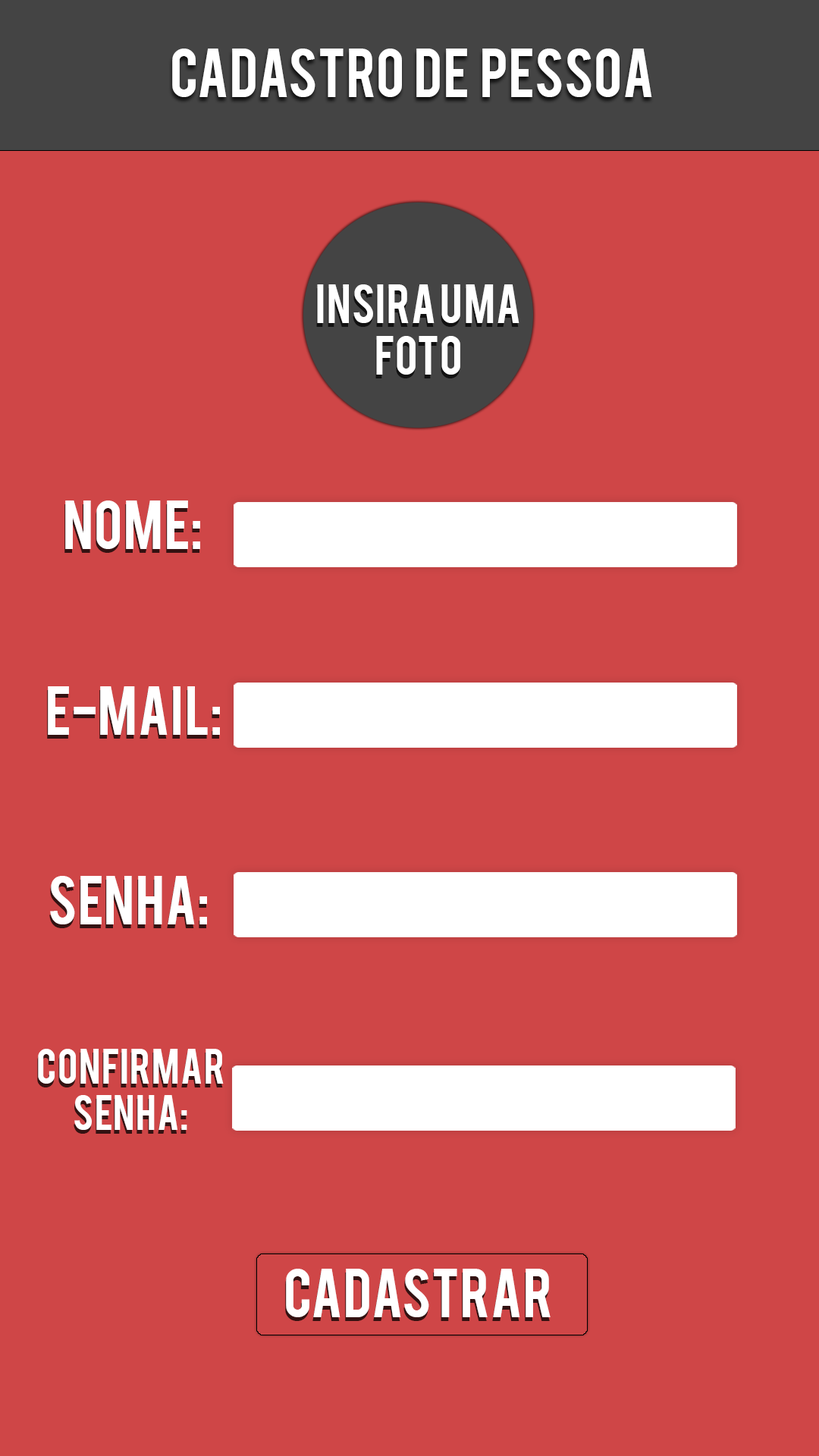
<style>
.page{position:relative;width:819px;height:1456px;background:#cf4647}
.page>*{position:absolute;margin:0}
.t1{font:54.6px "Bebas";color:#ffffff}
.t2{font:43.3px "Bebas";color:#ffffff}
.t3{font:38.7px "Bebas";color:#ffffff}
</style>
<div class="page">
<p class="t1" style="left:172px;top:49px;width:480px;height:48px">cadastro  de  pessoa</p>
<p class="t2" style="left:317px;top:284px;width:202px;height:91px;text-align:center">INSIRA UMA<br>FOTO</p>
<p class="t1" style="left:65px;top:500px;width:135px;height:49px">Nome:</p>
<p class="t1" style="left:48px;top:686px;width:172px;height:49px">E-mail:</p>
<p class="t1" style="left:50px;top:876px;width:157px;height:48px">Senha:</p>
<p class="t3" style="left:38px;top:1049px;width:186px;height:81px;text-align:center">Confirmar<br>Senha:</p>
<p class="t1" style="left:286px;top:1269px;width:265px;height:48px">CADASTRAR</p>
</div>
